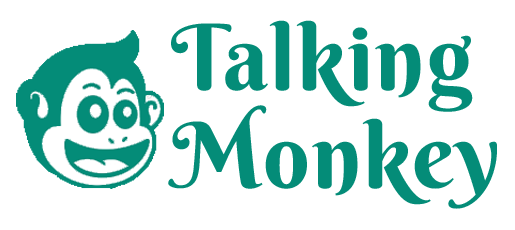
<style>
.page{position:relative;width:515px;height:230px;background:#ffffff}
.page>*{position:absolute;margin:0}
.t1{font:91.2px/97.5px "BerkshireSwash-Regular";letter-spacing:0.02em;color:#048c78}
</style>
<div class="page">
<p class="t1" style="left:168px;top:20px;width:329px;height:189px">Talking<br>Monkey</p>
</div>
